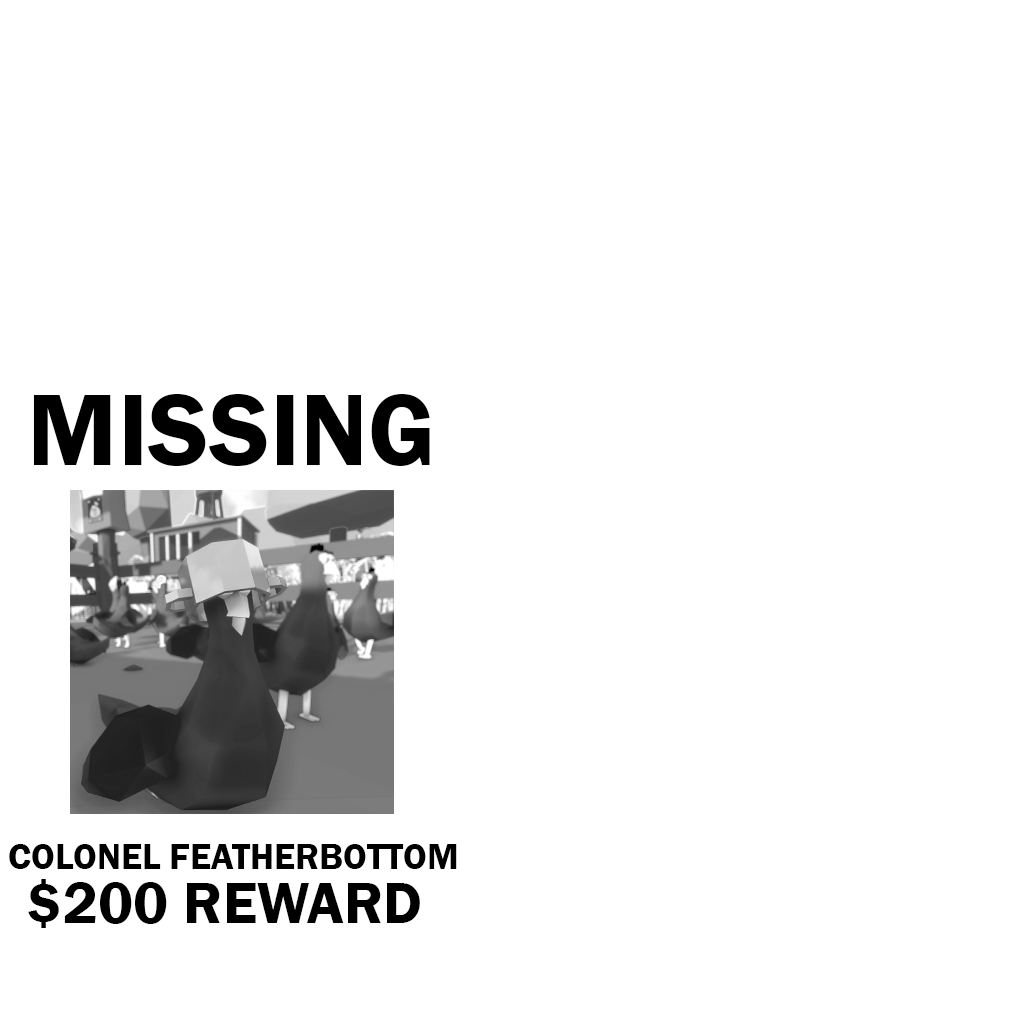
<style>
.page{position:relative;width:1024px;height:1024px;background:#ffffff}
.page>*{position:absolute;margin:0}
.t1{font:105px "FranklinGothic-Demi";color:#000000}
.t2{font:37px "FranklinGothic-Demi";color:#000000}
.t3{font:60px "FranklinGothic-Demi";color:#000000}
</style>
<div class="page">
<p class="t1" style="left:33px;top:394px;width:397px;height:72px">MISSING</p>
<p class="t2" style="left:9px;top:844px;width:448px;height:25px">COLONEL FEATHERBOTTOM</p>
<p class="t3" style="left:28px;top:879px;width:392px;height:49px">$200 REWARD</p>
</div>
